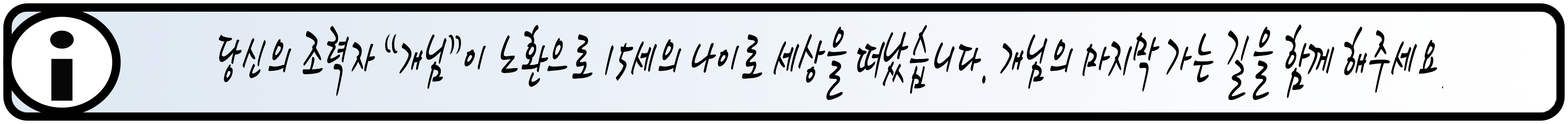
<style>
.page{position:relative;width:1568px;height:124px}
.page>*{position:absolute;margin:0}
.t1{font:80.4px "HaanCjaB";color:#000000;scale:0.47 1}
.t2{font:14.5px "H2mkpB";color:#000000;scale:0.47 1}
</style>
<div class="page">
<p class="t1" style="left:219px;top:25px;width:1224px;height:76px">당신의 조력자 “개님”이 노환으로 15세의 나이로 세상을 떠났습니다. 개님의 마지막 가는 길을 함께 해주세요<span class="t2">.</span></p>
</div>
